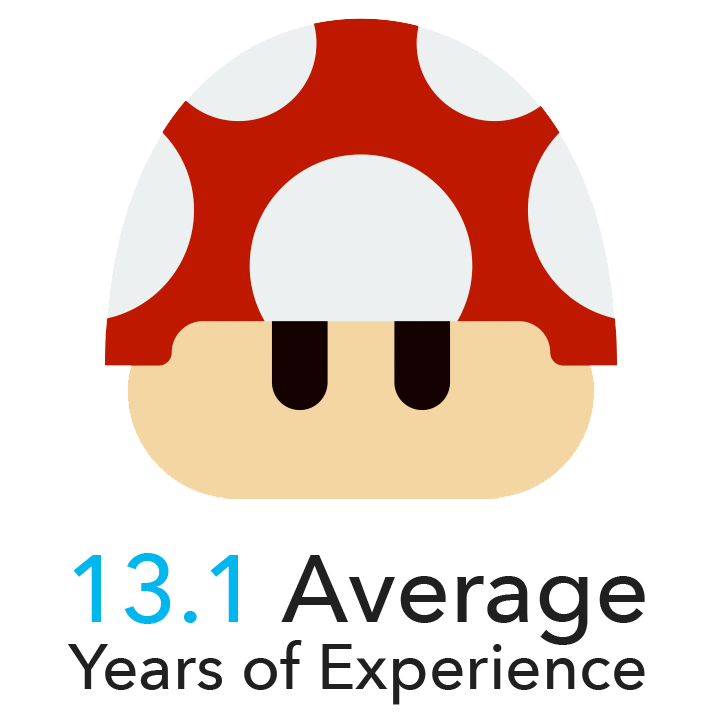
<style>
.page{position:relative;width:720px;height:720px;background:#ffffff}
.page>*{position:absolute;margin:0}
.t1{font:95px "AvenirNext-Medium";color:#202020}
.t2{font:95px "AvenirNext-Medium";color:#00b6ef}
.t3{font:64px "AvenirNext-Medium";color:#202020}
</style>
<div class="page">
<p class="t1" style="left:73px;top:553px;width:572px;height:92px"><span class="t2">13.1 </span>Average</p>
<p class="t3" style="left:67px;top:640px;width:578px;height:65px">Years of Experience</p>
</div>
